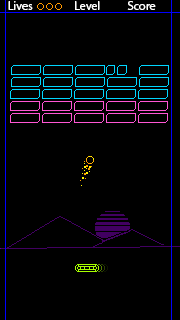
<style>
.page{position:relative;width:180px;height:320px;background:#000000}
.page>*{position:absolute;margin:0}
.t1{font:12px "MyriadPro-Regular";color:#ffffff}
</style>
<div class="page">
<p class="t1" style="left:8px;top:1px;width:25px;height:9px">Lives</p>
<p class="t1" style="left:75px;top:1px;width:25px;height:9px">Level</p>
<p class="t1" style="left:127px;top:1px;width:29px;height:9px">Score</p>
</div>
